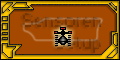
<style>
.page{position:relative;width:120px;height:60px;background:#a54900}
.page>*{position:absolute;margin:0}
.t1{font:18px "Small Fonts"}
</style>
<div class="page">
<p class="t1" style="left:23px;top:13px;width:78px;height:40px">Sensoren<br>        Setup</p>
</div>
